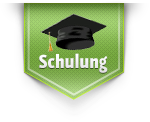
<style>
.page{position:relative;width:150px;height:122px;background:#ffffff}
.page>*{position:absolute;margin:0}
.t1{font:17.6px "GraublauWeb-Bold";letter-spacing:0.01em;color:#f1eff1}
</style>
<div class="page">
<p class="t1" style="left:39px;top:53px;width:69px;height:20px">Schulung</p>
</div>
